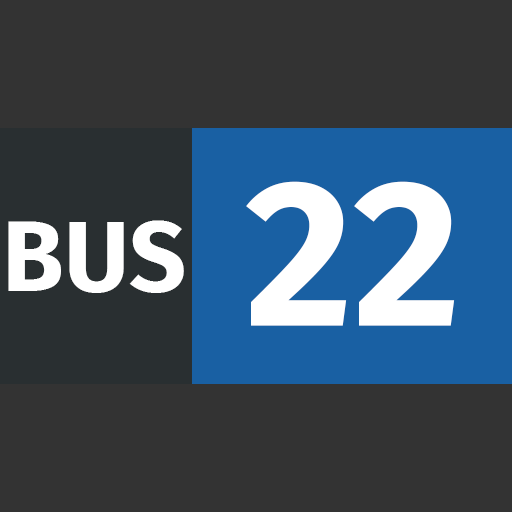
<style>
.page{position:relative;width:512px;height:512px;background:#333333}
.page>*{position:absolute;margin:0}
.t1{font:208.3px "FiraSans-Bold";color:#ffffff}
.t2{font:100px "FiraSans-Bold";color:#ffffff}
</style>
<div class="page">
<p class="t1" style="left:246px;top:181px;width:209px;height:145px">22</p>
<p class="t2" style="left:8px;top:220px;width:176px;height:73px">BUS</p>
</div>
